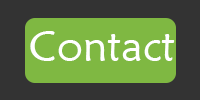
<style>
.page{position:relative;width:200px;height:100px;background:#333333}
.page>*{position:absolute;margin:0}
.t1{font:43px "MaiandraGD-Regular";color:#ffffff}
</style>
<div class="page">
<p class="t1" style="left:30px;top:31px;width:145px;height:30px">Contact</p>
</div>
